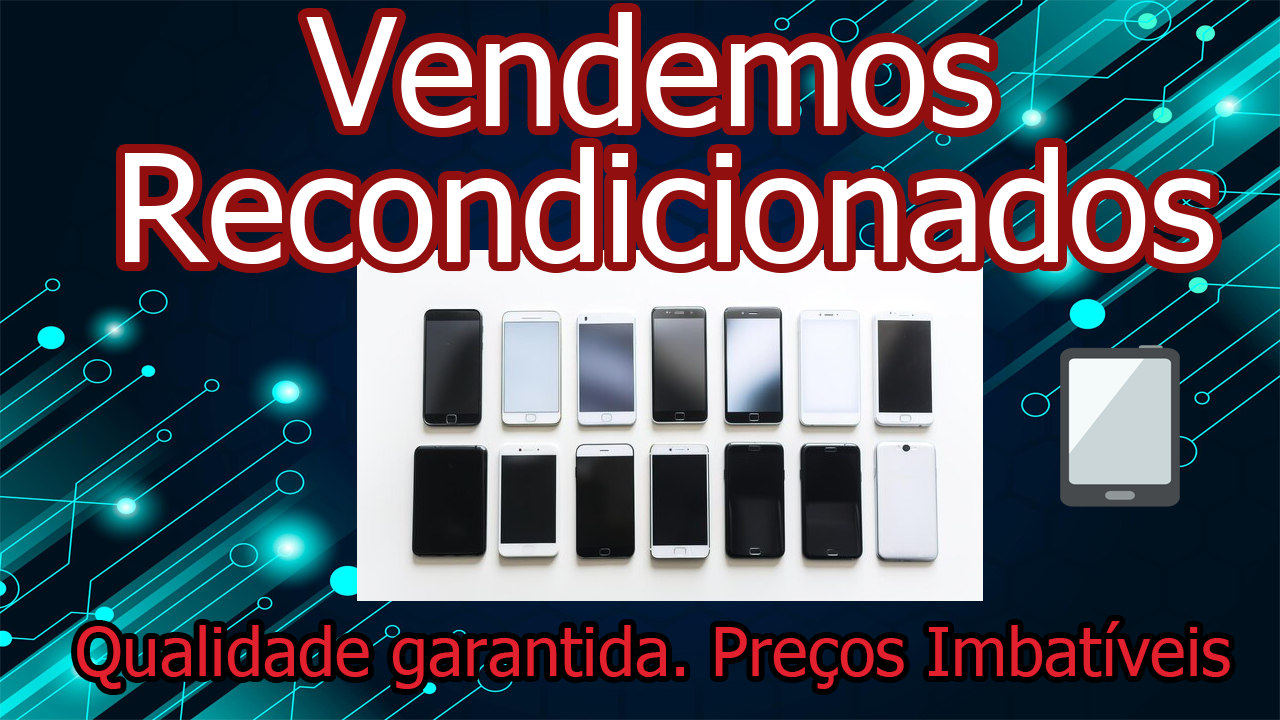
<style>
.page{position:relative;width:1280px;height:720px}
.page>*{position:absolute;margin:0}
.t1{font:67px "Tahoma";color:#e3202d}
</style>
<div class="page">
<p class="t1" style="left:77px;top:621px;width:1153px;height:68px">Qualidade garantida. Preços Imbatíveis</p>
</div>
